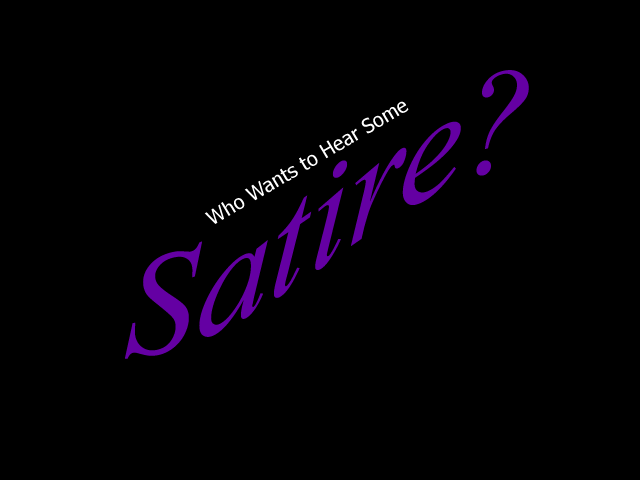
<style>
.page{position:relative;width:640px;height:480px;background:#000000}
.page>*{position:absolute;margin:0}
.t1{font:144px "TimesNewRomanPS-ItalicMT";color:#6400a3}
.t2{font:20px "Tahoma";color:#ffffff}
</style>
<div class="page">
<p class="t1" style="left:125px;top:70px;width:404px;height:289px">Satire?</p>
<p class="t2" style="left:204px;top:101px;width:205px;height:123px;rotate:-31deg">Who Wants to Hear Some</p>
</div>
